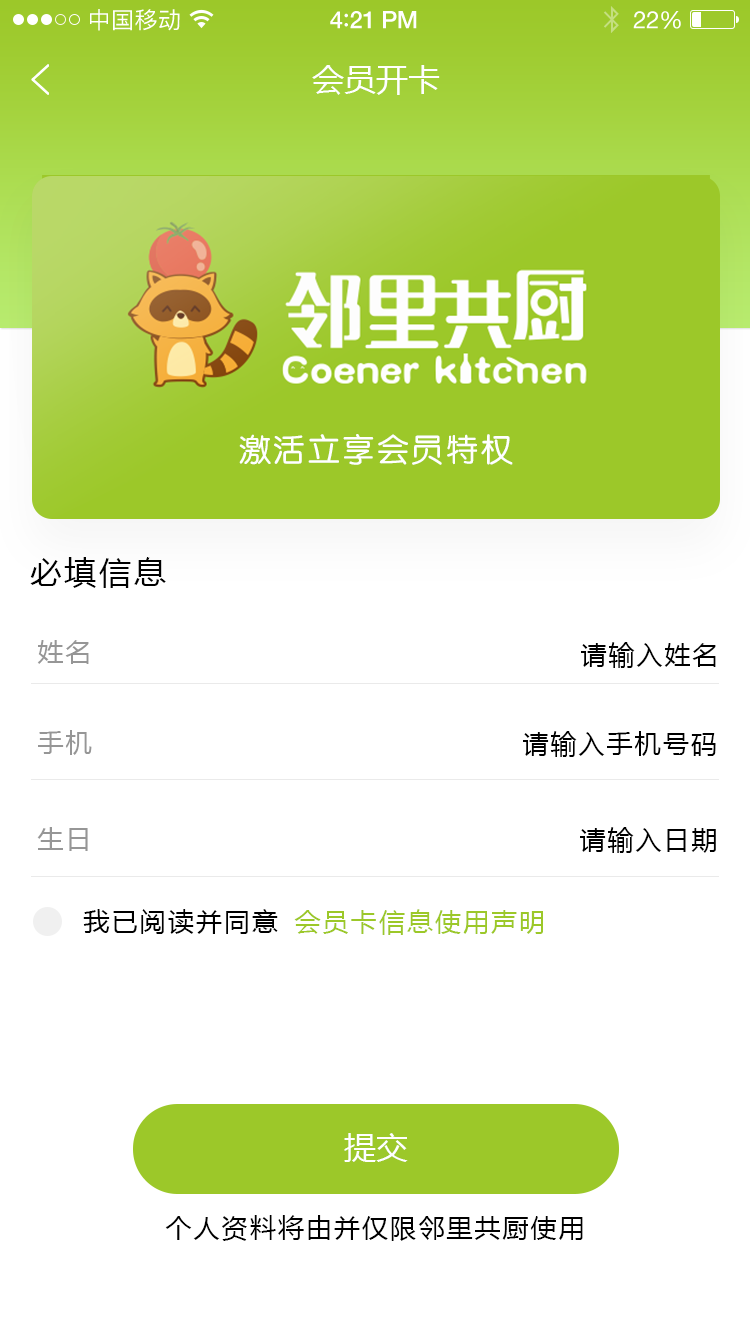
<style>
.page{position:relative;width:750px;height:1334px;background:#ffffff}
.page>*{position:absolute;margin:0}
.t1{font:23px "PingFangSC-Regular";letter-spacing:0.02em;color:#ffffff}
.t2{font:24px "HelveticaNeue-Medium";letter-spacing:-0.02em;color:#ffffff}
.t3{font:26px "Avenir-Medium";letter-spacing:-0.02em;color:#ffffff}
.t4{font:24px "HelveticaNeue";letter-spacing:-0.02em;color:#ffffff}
.t5{font:32px "MicrosoftYaHei";color:#ffffff;text-transform:uppercase}
.t6{font:32px "FZY3JW--GB1-0";letter-spacing:0.08em;color:#ffffff;text-transform:uppercase}
.t7{font:32px "MicrosoftYaHei";letter-spacing:0.08em;color:#000000;text-transform:uppercase}
.t8{font:26px "MicrosoftYaHei";letter-spacing:0.08em;color:#969696;text-transform:uppercase}
.t9{font:26px "MicrosoftYaHei";letter-spacing:0.08em;color:#000000;text-transform:uppercase}
.t10{font:26px "MicrosoftYaHei";letter-spacing:0.08em;color:#9cc829;text-transform:uppercase}
</style>
<div class="page">
<p class="t1" style="left:90px;top:9px;width:90px;height:22px">中国移动</p>
<p class="t2" style="left:330px;top:11px;width:87px;height:18px">4<span class="t3">:</span>21 PM</p>
<p class="t4" style="left:633px;top:11px;width:48px;height:18px">22%</p>
<p class="t5" style="left:312px;top:65px;width:128px;height:30px">会员开卡</p>
<p class="t6" style="left:239px;top:434px;width:274px;height:31px">激活立享会员特权</p>
<p class="t7" style="left:30px;top:557px;width:136px;height:31px">必填信息</p>
<p class="t8" style="left:37px;top:640px;width:52px;height:24px">姓名</p>
<p class="t9" style="left:581px;top:642px;width:135px;height:26px">请输入姓名</p>
<p class="t8" style="left:38px;top:730px;width:54px;height:25px">手机</p>
<p class="t9" style="left:523px;top:731px;width:193px;height:26px">请输入手机号码</p>
<p class="t8" style="left:37px;top:827px;width:51px;height:24px">生日</p>
<p class="t9" style="left:580px;top:827px;width:136px;height:26px">请输入日期</p>
<p class="t9" style="left:83px;top:909px;width:195px;height:25px">我已阅读并同意</p>
<p class="t10" style="left:294px;top:909px;width:249px;height:26px">会员卡信息使用声明</p>
<p class="t5" style="left:344px;top:1133px;width:64px;height:29px">提交</p>
<p class="t9" style="left:165px;top:1215px;width:418px;height:26px">个人资料将由并仅限邻里共厨使用</p>
</div>
